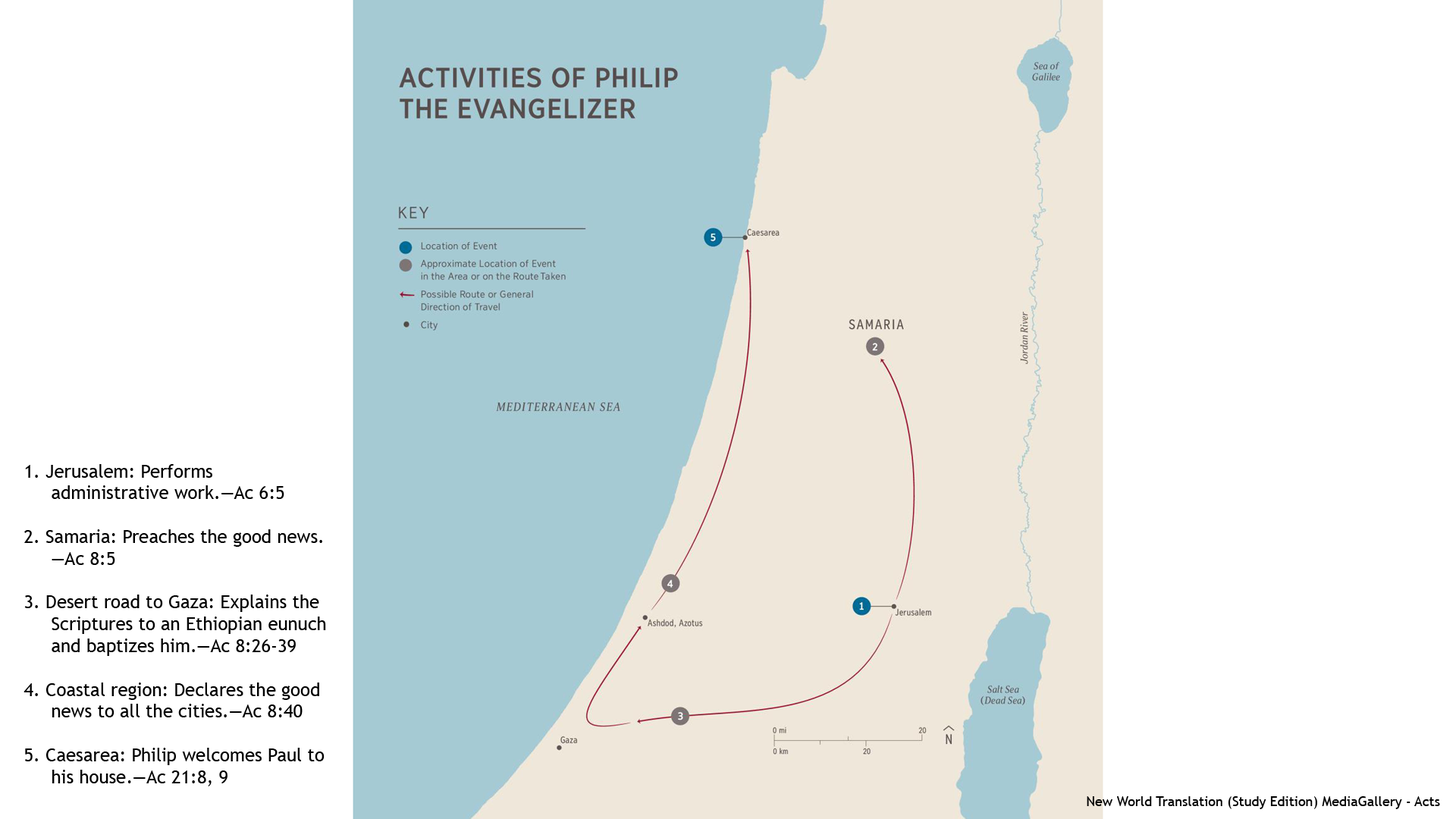
<style>
.page{position:relative;width:1456px;height:819px;background:#ffffff}
.page>*{position:absolute;margin:0}
.t1{font:18.2px "TrebuchetMS";color:#000000}
.t2{font:13.6px "TrebuchetMS";color:#000000}
</style>
<div class="page">
<p class="t1" style="left:24px;top:464px;width:302px;height:322px">1. Jerusalem: Performs <br> administrative work.—Ac 6:5<br><br>2. Samaria: Preaches the good news.<br> —Ac 8:5<br><br>3. Desert road to Gaza: Explains the <br> Scriptures to an Ethiopian eunuch <br> and baptizes him.—Ac 8:26-39<br><br>4. Coastal region: Declares the good <br> news to all the cities.—Ac 8:40<br><br>5. Caesarea: Philip welcomes Paul to <br> his house.—Ac 21:8, 9</p>
<p class="t2" style="left:1087px;top:796px;width:353px;height:13px">New World Translation (Study Edition) MediaGallery - Acts</p>
</div>
